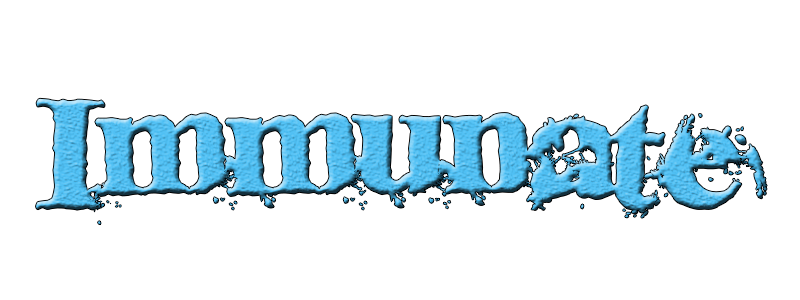
<style>
.page{position:relative;width:800px;height:300px;background:#ffffff}
.page>*{position:absolute;margin:0}
.t1{font:216px "InkSpecial";scale:1.05 1}
</style>
<div class="page">
<p class="t1" style="left:36px;top:98px;width:731px;height:127px">Immunate</p>
</div>
